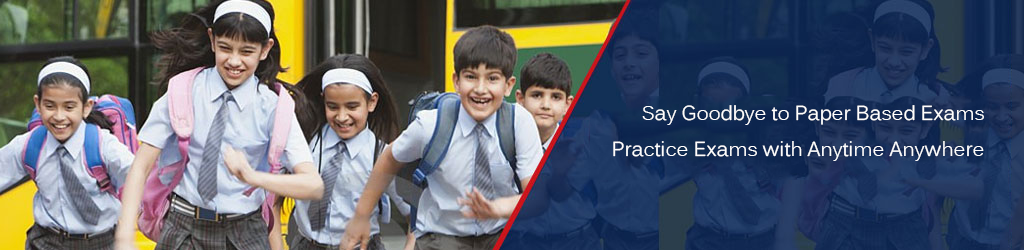
<style>
.page{position:relative;width:1024px;height:250px}
.page>*{position:absolute;margin:0}
.t1{font:20px/36px "Kalinga";color:#ffffff}
</style>
<div class="page">
<p class="t1" style="left:613px;top:105px;width:371px;height:56px;text-align:right">Say Goodbye to Paper Based Exams <br>Practice Exams with Anytime Anywhere</p>
</div>
